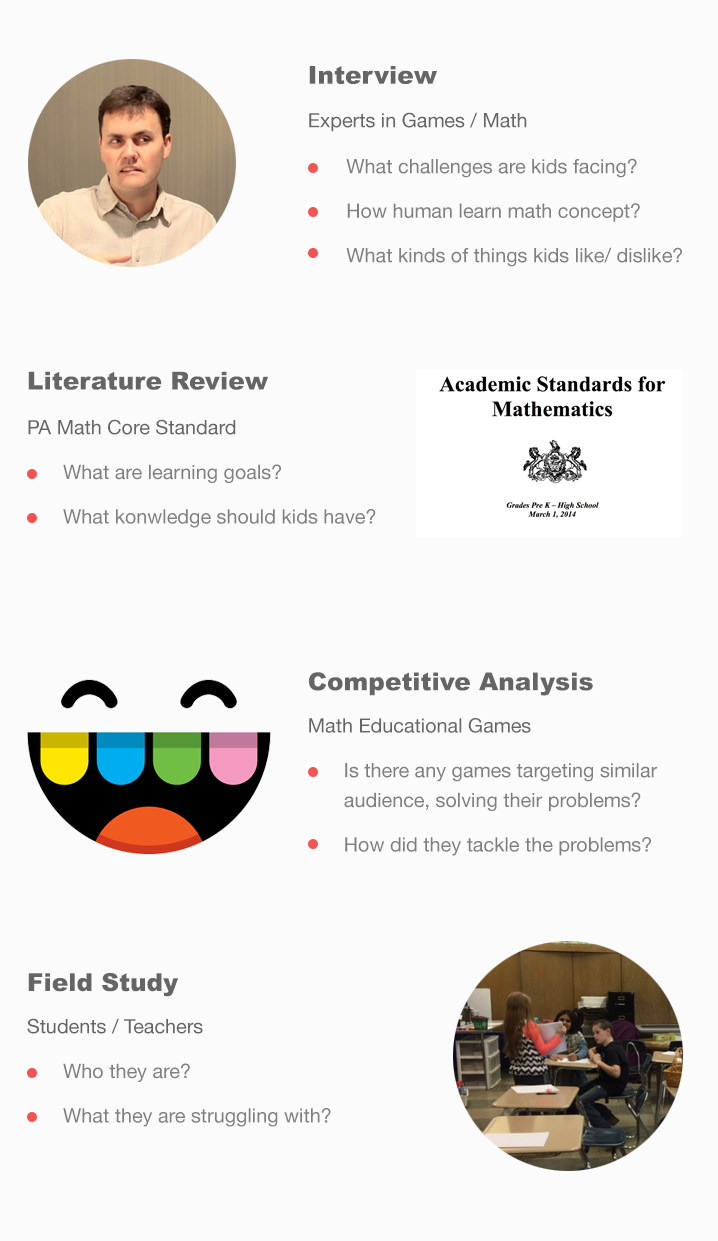
<style>
.page{position:relative;width:718px;height:1241px;background:#fbfbfb}
.page>*{position:absolute;margin:0}
.t1{font:24.8px "Arial-Black";color:#656565}
.t2{font:19.8px "HelveticaNeue";color:#656565}
.t3{font:19.8px/44.6px "HelveticaNeue";color:#7f7f7f}
.t4{font:19.8px/29.7px "HelveticaNeue";color:#7f7f7f}
</style>
<div class="page">
<p class="t1" style="left:309px;top:66px;width:128px;height:18px">Interview</p>
<p class="t2" style="left:309px;top:112px;width:218px;height:20px">Experts in Games / Math</p>
<p class="t3" style="left:346px;top:158px;width:336px;height:109px">What challenges are kids facing?<br>How human learn math concept?<br>What kinds of things kids like/ dislike?</p>
<p class="t1" style="left:28px;top:371px;width:240px;height:19px">Literature Review</p>
<p class="t2" style="left:28px;top:419px;width:208px;height:16px">PA Math Core Standard</p>
<p class="t3" style="left:63px;top:464px;width:313px;height:64px">What are learning goals?<br>What konwledge should kids have?</p>
<p class="t1" style="left:309px;top:672px;width:284px;height:24px">Competitive Analysis</p>
<p class="t2" style="left:309px;top:718px;width:222px;height:15px">Math Educational Games</p>
<p class="t4" style="left:344px;top:763px;width:314px;height:93px"><span class="t3">I</span>s there any games targeting similar audience, solving their problems?<br><span class="t3">How did they tackle the problems?</span></p>
<p class="t1" style="left:28px;top:973px;width:150px;height:24px">Field Study</p>
<p class="t2" style="left:27px;top:1018px;width:176px;height:16px">Students / Teachers</p>
<p class="t3" style="left:63px;top:1063px;width:268px;height:64px">Who they are?<br>What they are struggling with?</p>
</div>
